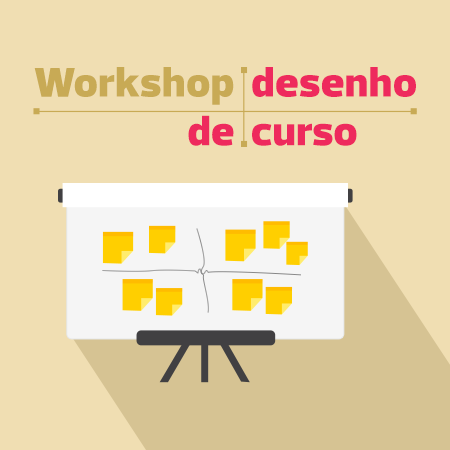
<style>
.page{position:relative;width:450px;height:450px;background:#f0deb2}
.page>*{position:absolute;margin:0}
.t1{font:42px "Prelo-Black";letter-spacing:0.02em;color:#c8aa55;scale:1.04 1}
.t2{font:42px "Prelo-Black";letter-spacing:0.02em;color:#ee2a5d;scale:1.04 1}
.t3{font:42px "Prelo-Black";letter-spacing:0.02em;color:#ee2a5d}
</style>
<div class="page">
<p class="t1" style="left:34px;top:67px;width:200px;height:38px">Workshop</p>
<p class="t2" style="left:252px;top:67px;width:164px;height:30px">desenho</p>
<p class="t3" style="left:188px;top:115px;width:46px;height:31px">de</p>
<p class="t3" style="left:252px;top:123px;width:105px;height:23px">curso</p>
</div>
